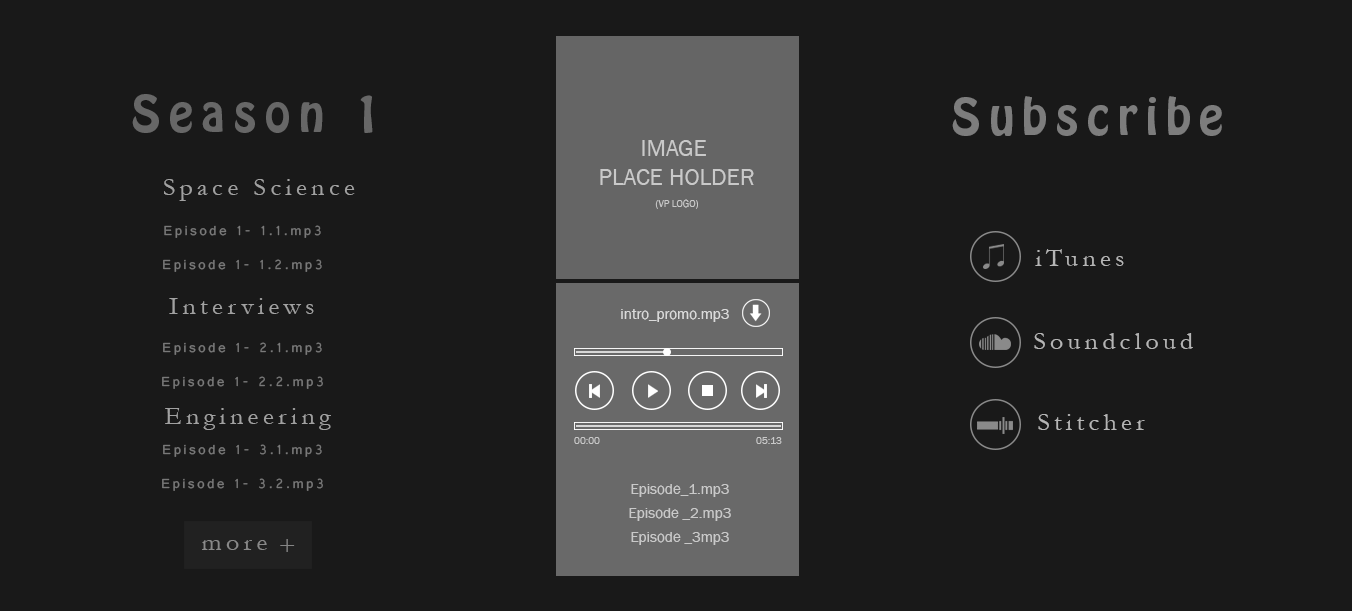
<style>
.page{position:relative;width:1352px;height:611px;background:#191919}
.page>*{position:absolute;margin:0}
.t1{font:44.5px "HoboStd";letter-spacing:0.18em;color:#676767;scale:1.03 1}
.t2{font:44.5px "HoboStd";letter-spacing:0.18em;color:#7d7d7d;scale:1.03 1}
.t3{font:24px "FranklinGothic-Book";color:#c9c9c9;text-transform:uppercase}
.t4{font:24.8px "Garamond";letter-spacing:0.18em;color:#a1a1a1;scale:1.03 1}
.t5{font:10px "FranklinGothic-Book";color:#c9c9c9;text-transform:uppercase}
.t6{font:13.9px "Gautami";letter-spacing:0.18em;color:#797979;scale:1.03 1}
.t7{font:24.8px "Garamond";letter-spacing:0.18em;color:#b5b5b5;scale:1.03 1}
.t8{font:15px "FranklinGothic-Book";color:#dadada}
.t9{font:15px "FranklinGothic-Book";color:#c9c9c9}
.t10{font:24.8px "Garamond";letter-spacing:0.18em;color:#898989;scale:1.03 1}
.t11{font:24.8px "Garamond";letter-spacing:0.18em;color:#858585;scale:1.03 1}
</style>
<div class="page">
<p class="t1" style="left:132px;top:94px;width:241px;height:39px">Season 1</p>
<p class="t2" style="left:952px;top:96px;width:270px;height:40px">Subscribe</p>
<p class="t3" style="left:600px;top:140px;width:154px;height:45px;text-align:center">image <br>place holder</p>
<p class="t4" style="left:164px;top:179px;width:191px;height:22px">Space Science</p>
<p class="t5" style="left:655px;top:199px;width:43px;height:10px">(vp logo)</p>
<p class="t6" style="left:164px;top:225px;width:157px;height:13px">Episode 1- 1.1.mp3</p>
<p class="t7" style="left:1035px;top:249px;width:89px;height:17px">iTunes</p>
<p class="t6" style="left:163px;top:259px;width:159px;height:13px">Episode 1- 1.2.mp3</p>
<p class="t4" style="left:169px;top:298px;width:145px;height:16px">Interviews</p>
<p class="t8" style="left:621px;top:309px;width:108px;height:13px">intro_promo.mp3</p>
<p class="t6" style="left:163px;top:342px;width:159px;height:13px">Episode 1- 2.1.mp3</p>
<p class="t7" style="left:1034px;top:333px;width:159px;height:16px">Soundcloud</p>
<p class="t6" style="left:162px;top:376px;width:161px;height:13px">Episode 1- 2.2.mp3</p>
<p class="t4" style="left:165px;top:408px;width:166px;height:22px">Engineering</p>
<p class="t7" style="left:1038px;top:414px;width:107px;height:16px">Stitcher</p>
<p class="t5" style="left:574px;top:437px;width:26px;height:7px">00:00</p>
<p class="t5" style="left:756px;top:437px;width:26px;height:7px">05:13</p>
<p class="t6" style="left:163px;top:444px;width:159px;height:13px">Episode 1- 3.1.mp3</p>
<p class="t6" style="left:162px;top:478px;width:161px;height:13px">Episode 1- 3.2.mp3</p>
<p class="t9" style="left:631px;top:484px;width:98px;height:13px">Episode_1.mp3</p>
<p class="t9" style="left:629px;top:508px;width:102px;height:13px">Episode _2.mp3</p>
<p class="t9" style="left:631px;top:532px;width:98px;height:13px">Episode _3mp3</p>
<p class="t10" style="left:202px;top:540px;width:65px;height:10px">more</p>
<p class="t11" style="left:280px;top:539px;width:15px;height:13px">+</p>
</div>
